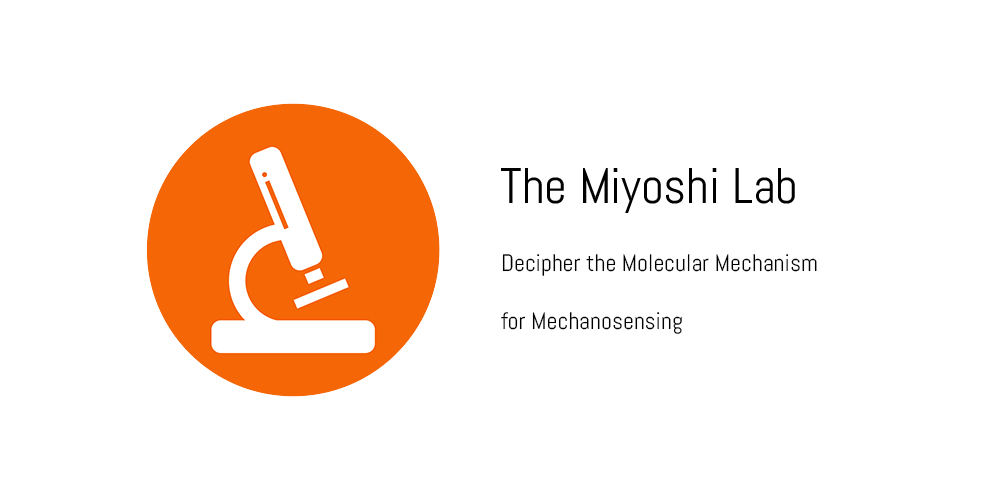
<style>
.page{position:relative;width:1000px;height:500px;background:#ffffff}
.page>*{position:absolute;margin:0}
.t1{font:50px "Abel-Regular";color:#000000}
.t2{font:24px "Abel-Regular";color:#000000}
</style>
<div class="page">
<p class="t1" style="left:501px;top:168px;width:294px;height:45px">The Miyoshi Lab</p>
<p class="t2" style="left:501px;top:254px;width:316px;height:80px">Decipher the Molecular Mechanism<br><br>for Mechanosensing</p>
</div>
